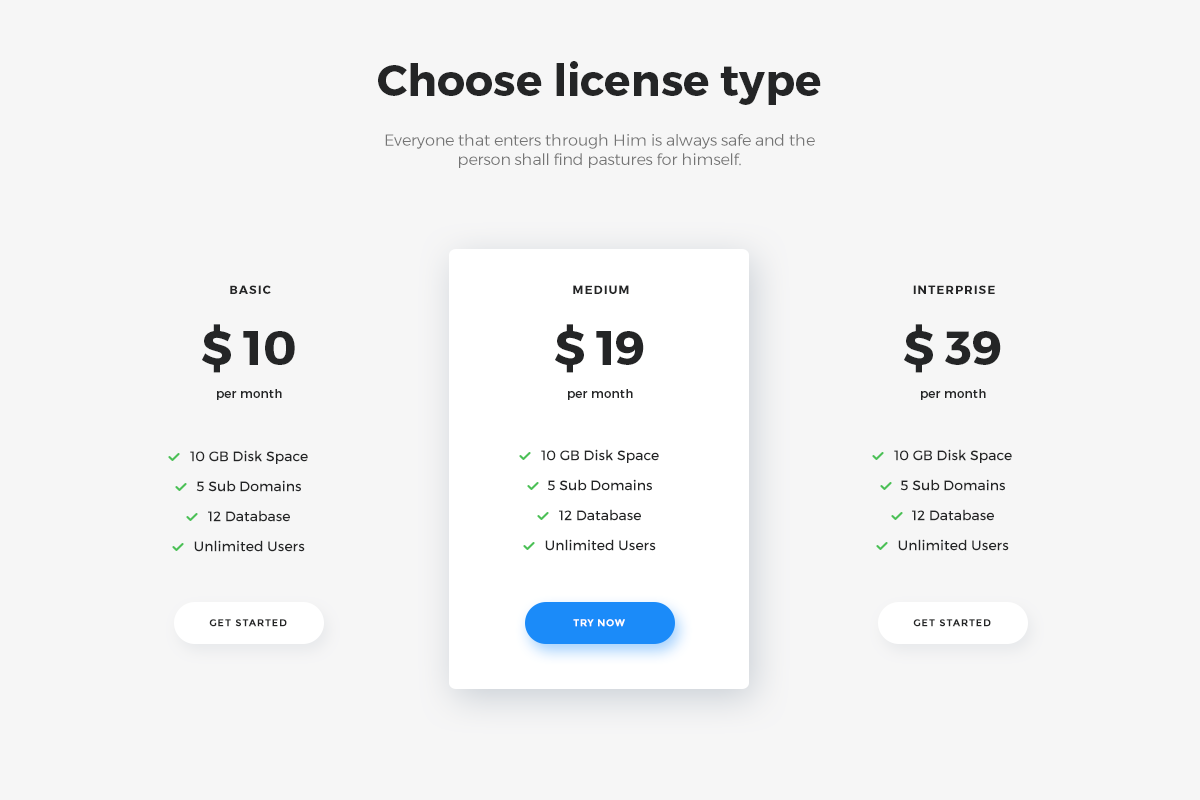
<style>
.page{position:relative;width:1200px;height:800px;background:#f6f6f6}
.page>*{position:absolute;margin:0}
.t1{font:44px "Montserrat-Bold";color:#242526}
.t2{font:16px "Montserrat-Light";color:#747474}
.t3{font:12px "Montserrat-Bold";letter-spacing:0.08em;color:#242526;text-transform:uppercase}
.t4{font:48px "Montserrat-Bold";color:#242526}
.t5{font:12px "Montserrat-Regular";letter-spacing:0.025em;color:#242526}
.t6{font:14px/30px "Montserrat-Regular";color:#242526}
.t7{font:10px "Montserrat-Bold";letter-spacing:0.08em;color:#242526;text-transform:uppercase}
.t8{font:10px "Montserrat-Bold";letter-spacing:0.05em;color:#ffffff;text-transform:uppercase}
</style>
<div class="page">
<p class="t1" style="left:378px;top:61px;width:443px;height:44px">Choose license type</p>
<p class="t2" style="left:385px;top:134px;width:430px;height:34px;text-align:center">Everyone that enters through Him is always safe and the person shall find pastures for himself.</p>
<p class="t3" style="left:230px;top:285px;width:41px;height:9px">basic</p>
<p class="t3" style="left:573px;top:285px;width:56px;height:9px">medium</p>
<p class="t3" style="left:913px;top:285px;width:82px;height:9px">interprise</p>
<p class="t4" style="left:202px;top:324px;width:93px;height:49px">$ 10</p>
<p class="t4" style="left:555px;top:324px;width:89px;height:49px">$ 19</p>
<p class="t4" style="left:904px;top:324px;width:97px;height:49px">$ 39</p>
<p class="t5" style="left:217px;top:389px;width:65px;height:11px">per month</p>
<p class="t5" style="left:568px;top:389px;width:65px;height:11px">per month</p>
<p class="t5" style="left:921px;top:389px;width:65px;height:11px">per month</p>
<p class="t6" style="left:541px;top:449px;width:118px;height:102px;text-align:center">10 GB Disk Space<br>5 Sub Domains<br>12 Database<br>Unlimited Users</p>
<p class="t6" style="left:894px;top:449px;width:118px;height:102px;text-align:center">10 GB Disk Space<br>5 Sub Domains<br>12 Database<br>Unlimited Users</p>
<p class="t6" style="left:190px;top:450px;width:118px;height:102px;text-align:center">10 GB Disk Space<br>5 Sub Domains<br>12 Database<br>Unlimited Users</p>
<p class="t7" style="left:209px;top:619px;width:78px;height:8px">get started</p>
<p class="t8" style="left:573px;top:619px;width:52px;height:8px">try now</p>
<p class="t7" style="left:913px;top:619px;width:78px;height:8px">get started</p>
</div>
